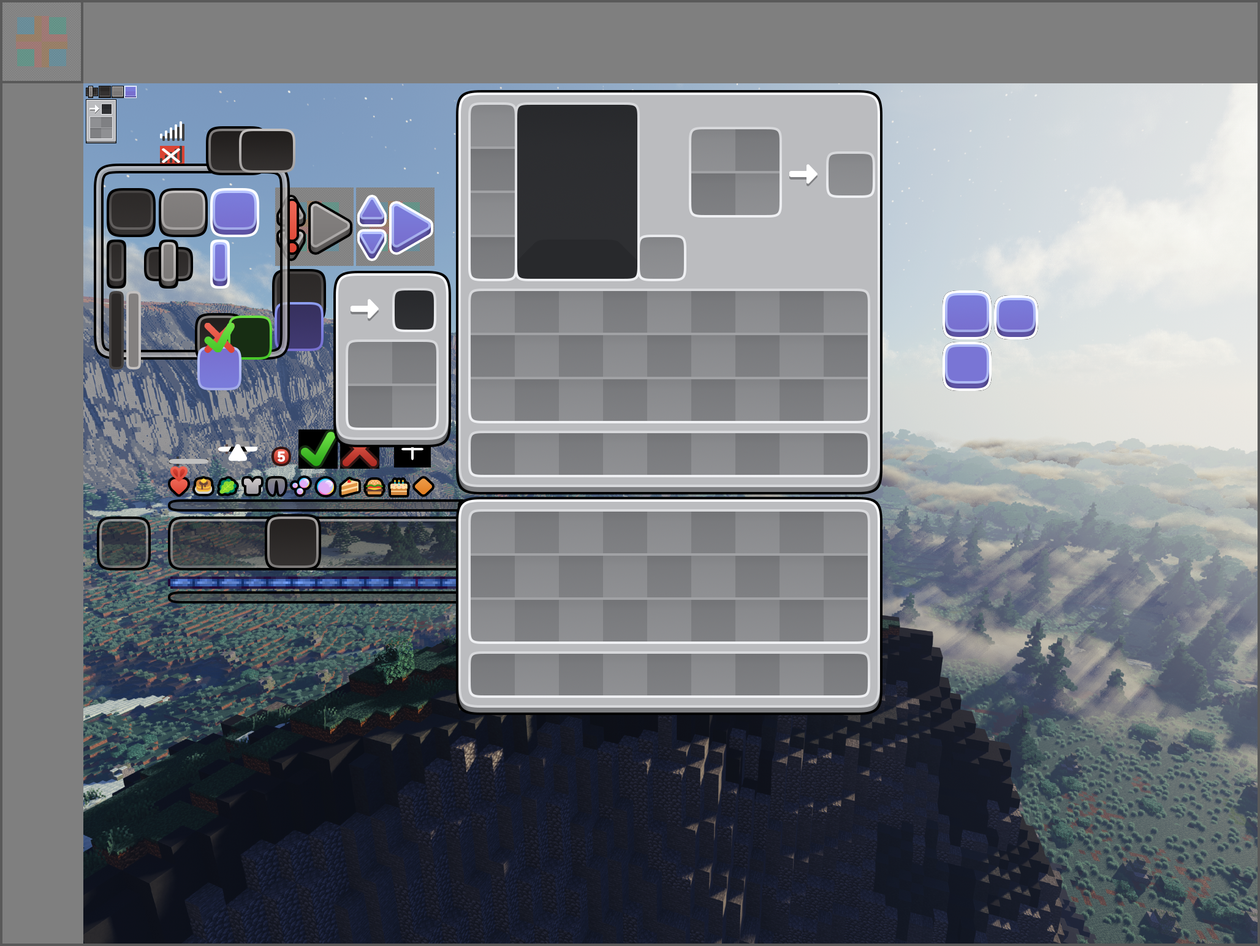
<style>
.page{position:relative;width:1260px;height:946px}
.page>*{position:absolute;margin:0}
.t1{font:12.9px "MiSans-Heavy";color:#ffffff}
</style>
<div class="page">
<p class="t1" style="left:278px;top:451px;width:7px;height:11px">5</p>
</div>
